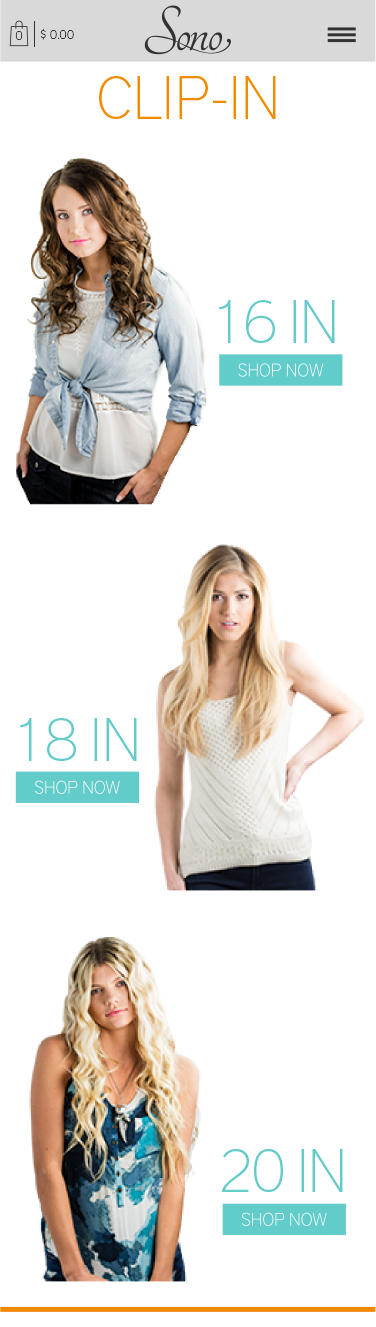
<style>
.page{position:relative;width:376px;height:1327px;background:#ffffff}
.page>*{position:absolute;margin:0}
.t1{font:12.4px "DistrictPro-Thin";color:#323232}
.t2{font:60px "DistrictPro-Thin";color:#f38b00}
.t3{font:60px "DistrictPro-Thin";letter-spacing:-0.031em;color:#65cbc9}
.t4{font:60px "DistrictPro-Thin";letter-spacing:-0.011em;color:#65cbc9}
</style>
<div class="page">
<p class="t1" style="left:40px;top:28px;width:34px;height:12px">$ 0.00</p>
<p class="t1" style="left:15px;top:31px;width:8px;height:9px">0</p>
<p class="t2" style="left:99px;top:76px;width:177px;height:43px">CLIP-IN</p>
<p class="t3" style="left:219px;top:300px;width:116px;height:43px">16 <span class="t4">IN</span></p>
<p class="t3" style="left:20px;top:718px;width:117px;height:43px">18 <span class="t4">IN</span></p>
<p class="t3" style="left:221px;top:1149px;width:122px;height:43px">20 <span class="t4">IN</span></p>
</div>
